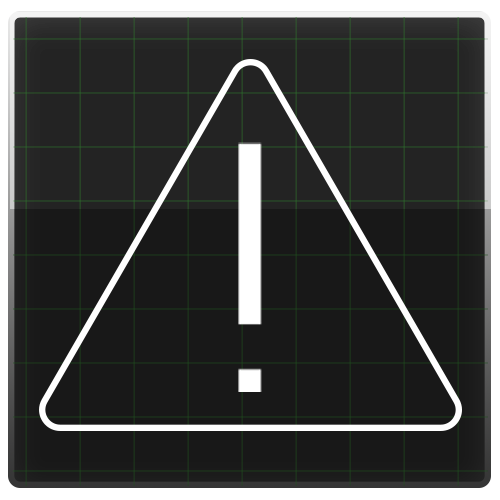
<style>
.page{position:relative;width:500px;height:500px;background:#181818}
.page>*{position:absolute;margin:0}
.t1{font:462.1px "FuturisticArmour";color:#ffffff}
</style>
<div class="page">
<p class="t1" style="left:238px;top:142px;width:24px;height:250px">!</p>
</div>
